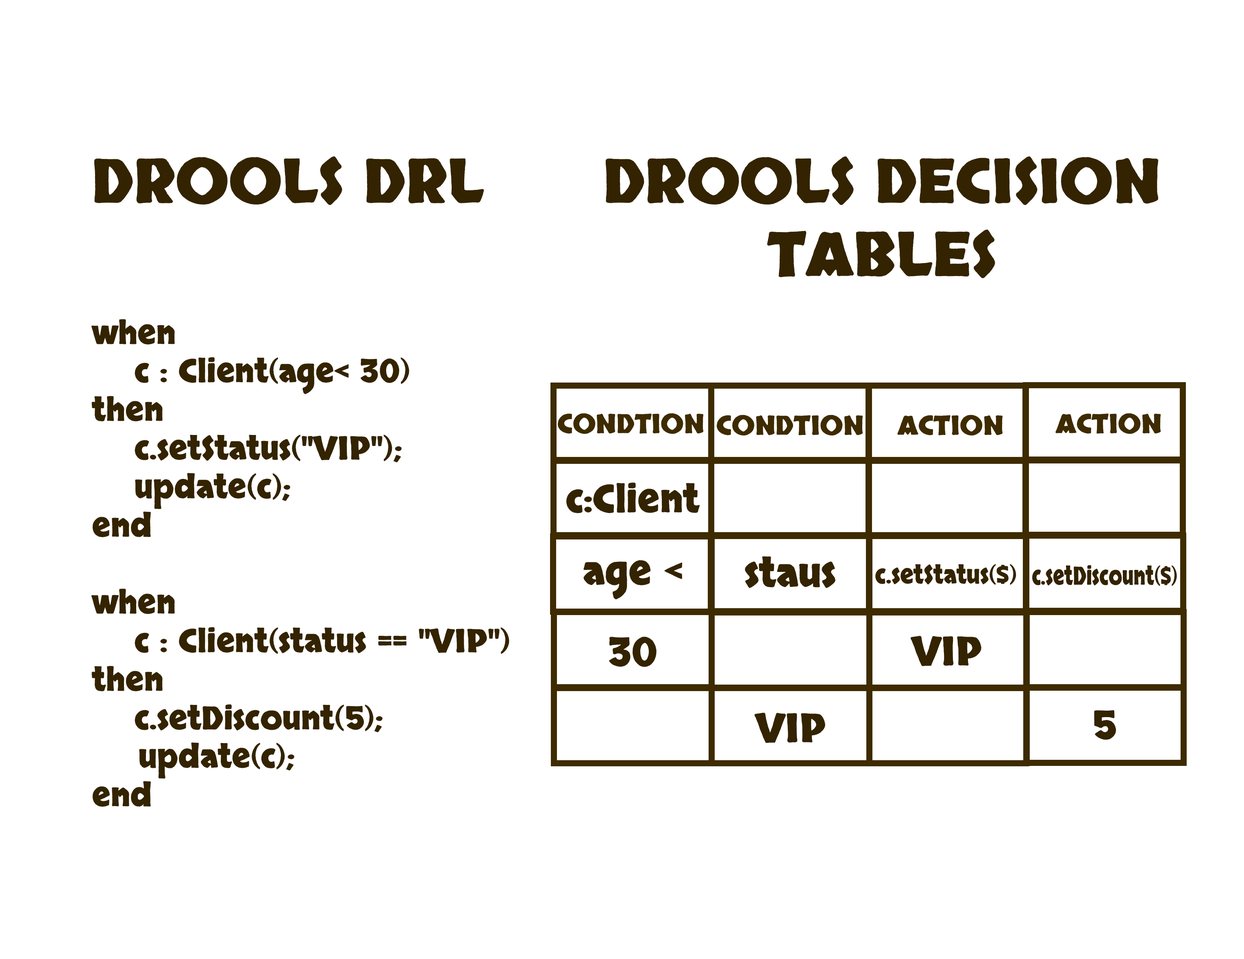
<style>
.page{position:relative;width:1244px;height:959px;background:#ffffff}
.page>*{position:absolute;margin:0}
.t1{font:61px "Skranji-Bold";color:#332300}
.t2{font:32.1px "Skranji-Bold";color:#332300}
.t3{font:26.4px "Skranji-Bold";color:#3e2b00}
.t4{font:38.2px "Skranji-Bold";color:#332300}
.t5{font:39.6px "Skranji-Bold";color:#332300}
.t6{font:25.1px "Skranji-Bold";color:#332300;scale:0.93 1}
.t7{font:25.1px "Skranji-Bold";color:#332300;scale:0.78 1}
</style>
<div class="page">
<p class="t1" style="left:94px;top:156px;width:390px;height:49px">DROOLS DRL</p>
<p class="t1" style="left:605px;top:156px;width:553px;height:122px;text-align:center">DROOLS DECISION<br>TABLES</p>
<p class="t2" style="left:91px;top:319px;width:418px;height:488px">when<br>    c : Client(age&lt; 30)<br>then<br>    c.setStatus("VIP");<br>    update(c);<br>end<br><br>when<br>    c : Client(status == "VIP")<br>then<br>    c.setDiscount(5);<br>    update(c);<br>end</p>
<p class="t3" style="left:558px;top:413px;width:145px;height:21px">CONDTION</p>
<p class="t3" style="left:1055px;top:413px;width:105px;height:21px">ACTION</p>
<p class="t3" style="left:717px;top:415px;width:145px;height:21px">CONDTION</p>
<p class="t3" style="left:897px;top:415px;width:105px;height:21px">ACTION</p>
<p class="t4" style="left:566px;top:482px;width:133px;height:31px">c:Client</p>
<p class="t5" style="left:745px;top:556px;width:90px;height:32px">staus</p>
<p class="t5" style="left:583px;top:560px;width:99px;height:39px">age &lt;</p>
<p class="t6" style="left:875px;top:564px;width:141px;height:21px">c.setStatus($)</p>
<p class="t7" style="left:1032px;top:565px;width:145px;height:21px">c.setDiscount($)</p>
<p class="t5" style="left:609px;top:636px;width:47px;height:31px">30</p>
<p class="t5" style="left:910px;top:636px;width:71px;height:30px">VIP</p>
<p class="t5" style="left:754px;top:712px;width:71px;height:31px">VIP</p>
<p class="t5" style="left:1094px;top:710px;width:22px;height:30px">5</p>
</div>
